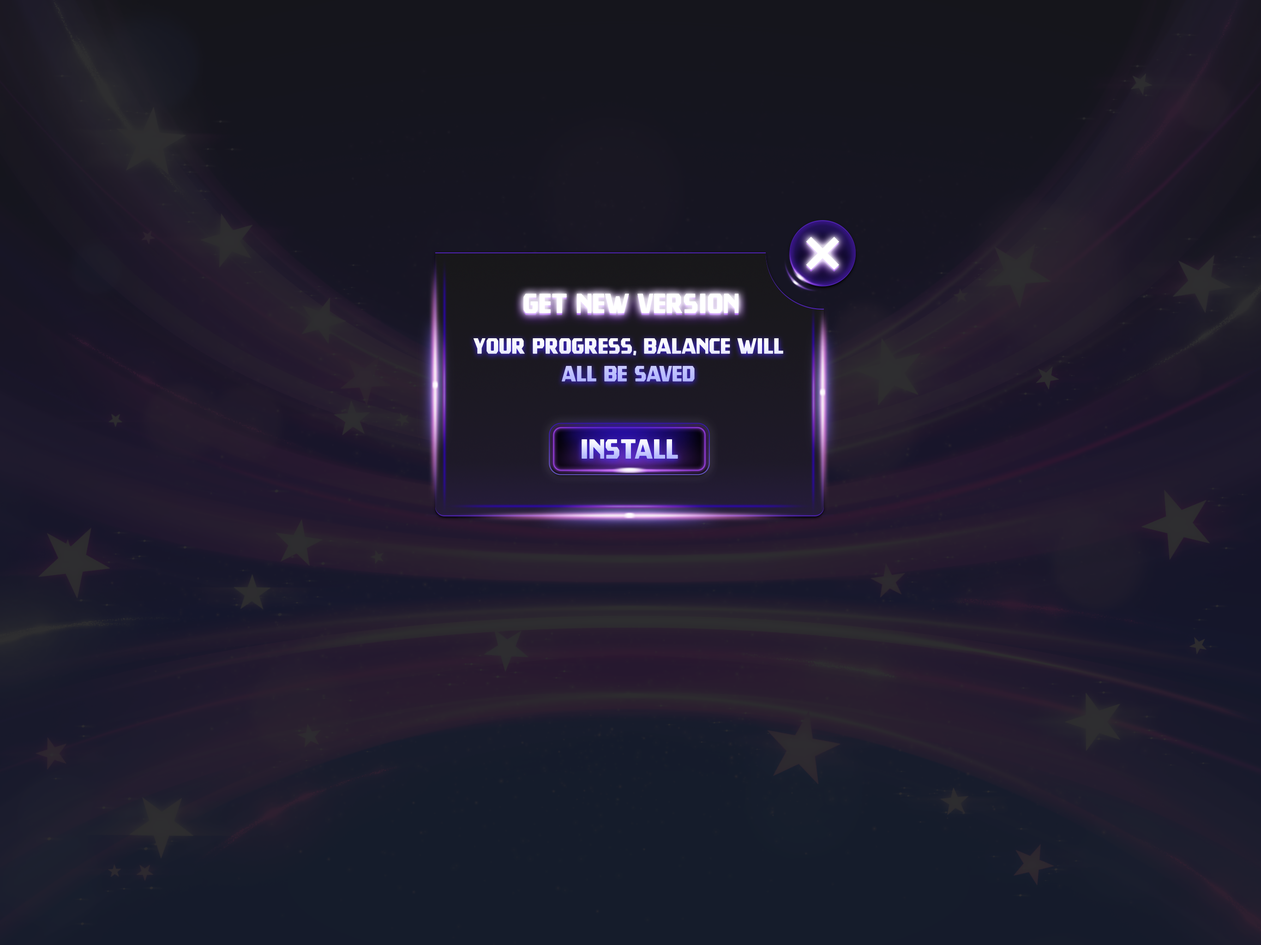
<style>
.page{position:relative;width:1261px;height:945px}
.page>*{position:absolute;margin:0}
.t1{font:27.7px "TradesmithRound";color:#ffffff}
.t2{font:22.2px/27.7px "TradesmithRound";color:#ffffff}
.t3{font:27.7px "TradesmithRound"}
</style>
<div class="page">
<p class="t1" style="left:524px;top:294px;width:215px;height:19px">get new version</p>
<p class="t2" style="left:473px;top:338px;width:310px;height:44px;text-align:center">Your Progress, Balance will all be saved</p>
<p class="t3" style="left:582px;top:439px;width:96px;height:20px">Install</p>
</div>
